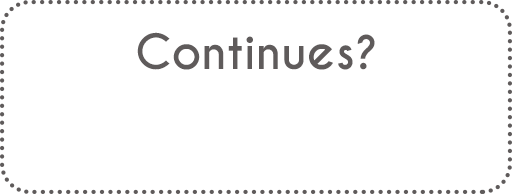
<style>
.page{position:relative;width:512px;height:194px;background:#ffffff}
.page>*{position:absolute;margin:0}
.t1{font:45.8px "CaviarDreams-Bold";color:#5f5b5b}
</style>
<div class="page">
<p class="t1" style="left:137px;top:32px;width:238px;height:38px">Continues?</p>
</div>
